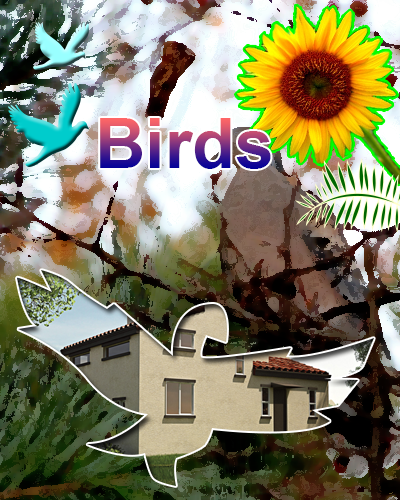
<style>
.page{position:relative;width:400px;height:500px}
.page>*{position:absolute;margin:0}
.t1{font:70px "Arial-BoldMT"}
</style>
<div class="page">
<p class="t1" style="left:100px;top:118px;width:171px;height:51px">Birds</p>
</div>
